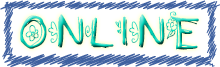
<style>
.page{position:relative;width:220px;height:67px;background:#ffffff}
.page>*{position:absolute;margin:0}
.t1{font:26px "Initialized"}
</style>
<div class="page">
<p class="t1" style="left:20px;top:11px;width:179px;height:39px">ONLINE</p>
</div>
